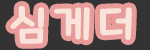
<style>
.page{position:relative;width:150px;height:50px;background:#333333}
.page>*{position:absolute;margin:0}
.t1{font:40.6px "MaplestoryLight";letter-spacing:0.12em;color:#f8e4db;font-weight:bold;scale:1.04 1}
</style>
<div class="page">
<p class="t1" style="left:10px;top:6px;width:122px;height:38px">심게더</p>
</div>
